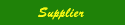
<style>
.page{position:relative;width:125px;height:25px;background:#1f8208}
.page>*{position:absolute;margin:0}
.t1{font:12px "Brussels";color:#f6f911}
</style>
<div class="page">
<p class="t1" style="left:38px;top:7px;width:46px;height:13px">Supplier</p>
</div>
